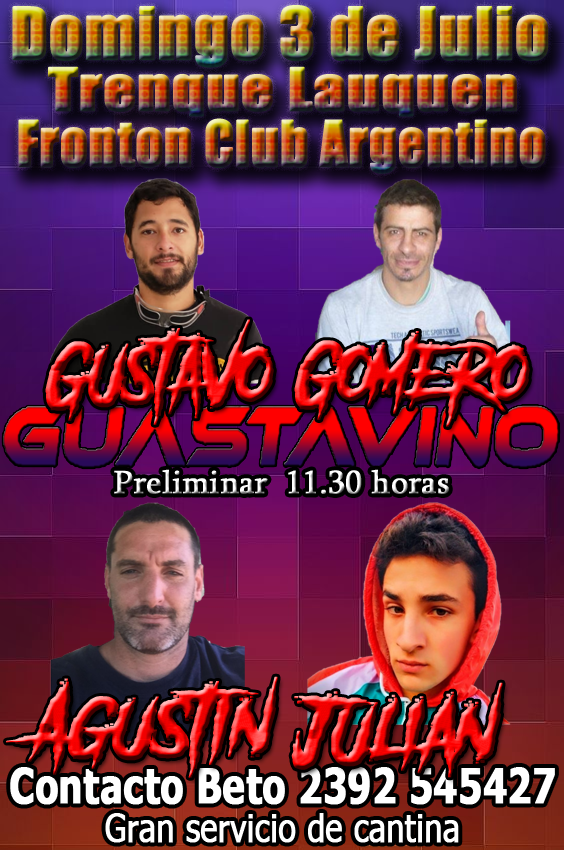
<style>
.page{position:relative;width:564px;height:850px}
.page>*{position:absolute;margin:0}
.t1{font:66.3px "Impact";font-weight:bold}
.t2{font:54.5px "Impact";font-weight:bold;scale:1.16 1}
.t3{font:58.2px "Impact";font-weight:bold;scale:0.91 1}
.t4{font:70.5px "AnotherDangerDemo";font-weight:bold;scale:0.96 1}
.t5{font:33px "Sylfaen";font-weight:bold}
.t6{font:70.5px "AnotherDangerDemo";font-weight:bold;scale:1.12 1}
.t7{font:48.2px "Tahoma-Bold";color:#ffffff;font-weight:bold;scale:0.77 1}
.t8{font:38.5px "Tahoma";color:#ffffff;font-weight:bold;scale:0.82 1}
</style>
<div class="page">
<p class="t1" style="left:12px;top:5px;width:537px;height:63px">Domingo 3 de Julio</p>
<p class="t2" style="left:48px;top:66px;width:469px;height:51px">Trenque Lauquen</p>
<p class="t3" style="left:18px;top:118px;width:528px;height:56px">Fronton Club Argentino</p>
<p class="t4" style="left:45px;top:319px;width:229px;height:106px">Gustavo</p>
<p class="t4" style="left:294px;top:331px;width:236px;height:96px">Gomero</p>
<p class="t5" style="left:114px;top:469px;width:335px;height:25px">Preliminar  11.30 horas</p>
<p class="t6" style="left:6px;top:676px;width:272px;height:102px">Agustin</p>
<p class="t6" style="left:291px;top:682px;width:212px;height:96px">Julian</p>
<p class="t7" style="left:10px;top:767px;width:545px;height:38px">Contacto Beto 2392 545427</p>
<p class="t8" style="left:105px;top:813px;width:354px;height:30px">Gran servicio de cantina</p>
</div>
